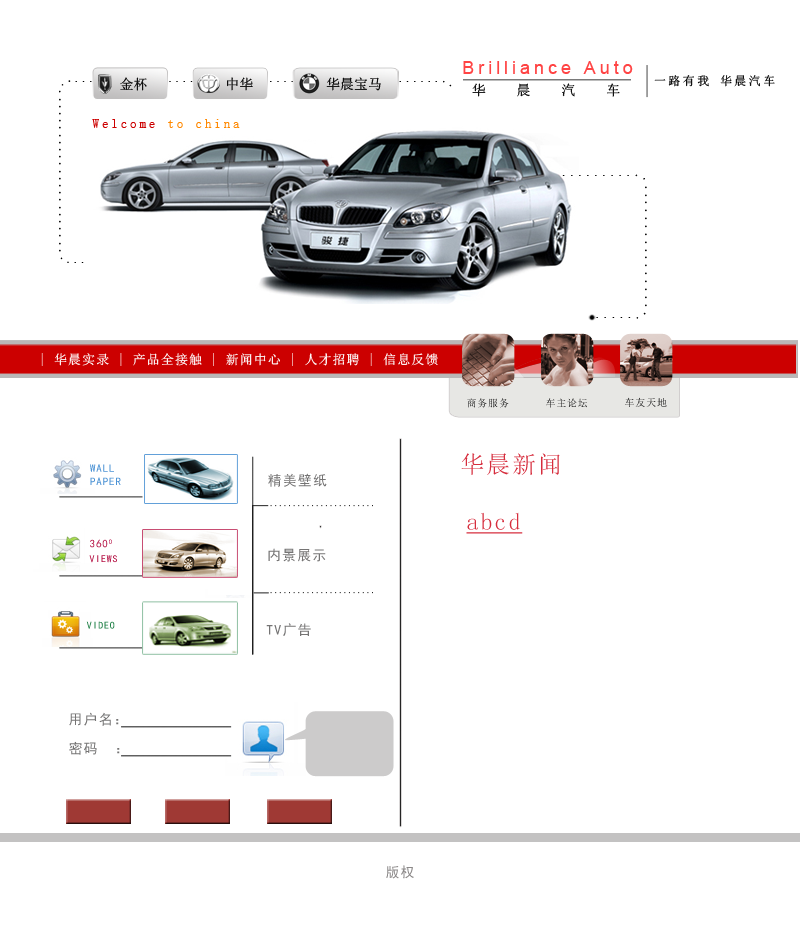
<style>
.page{position:relative;width:800px;height:933px;background:#ffffff}
.page>*{position:absolute;margin:0}
.t1{font:18px "ArialMT";letter-spacing:0.22em;color:#ff4444}
.t2{font:14px "SimSun";color:#000000}
.t3{font:14px "SimSun"}
.t4{font:12px "SimSun";letter-spacing:0.2em;color:#000000}
.t5{font:14px "SimSun";letter-spacing:2.2em;color:#000000}
.t6{font:13px "SimSun";letter-spacing:0.22em;color:#ff8800}
.t7{font:13px "SimSun";letter-spacing:0.22em;color:#cc0000}
.t8{font:10.9px "SimSun";letter-spacing:0.22em;color:#000000}
.t9{font:13px "SimSun";letter-spacing:0.08em;color:#ffffff}
.t10{font:10px "SimSun";letter-spacing:0.08em}
.t11{font:24px "SimSun";letter-spacing:0.08em;color:#d62d3d}
.t12{font:11px "SimHei";letter-spacing:0.08em;color:#4b92d4;text-transform:uppercase}
.t13{font:24px "SimHei";letter-spacing:0.08em;color:#757474;text-transform:uppercase}
.t14{font:24px "SimSun";letter-spacing:0.08em;color:#d62d3d;text-decoration:underline}
.t15{font:17px "SimHei";letter-spacing:0.08em;text-transform:uppercase}
.t16{font:11px "SimHei";letter-spacing:0.08em;text-transform:uppercase}
.t17{font:17px "SimHei";letter-spacing:0.08em;color:#1d7f44;text-transform:uppercase}
.t18{font:24px "SimHei";letter-spacing:0.08em;color:#8b8888;text-transform:uppercase}
</style>
<div class="page">
<p class="t1" style="left:463px;top:61px;width:170px;height:13px">Brilliance Auto</p>
<p class="t2" style="left:120px;top:77px;width:27px;height:14px">金杯</p>
<p class="t3" style="left:227px;top:77px;width:26px;height:14px">中华</p>
<p class="t3" style="left:326px;top:77px;width:55px;height:14px">华晨宝马</p>
<p class="t4" style="left:654px;top:75px;width:121px;height:12px">一路有我 华晨汽车</p>
<p class="t5" style="left:472px;top:83px;width:148px;height:14px">华晨汽车</p>
<p class="t6" style="left:92px;top:119px;width:148px;height:9px"><span class="t7">Welcome </span>to china</p>
<p class="t8" style="left:562px;top:174px;width:85px;height:145px">..................................</p>
<p class="t9" style="left:41px;top:353px;width:397px;height:13px">| 华晨实录 | 产品全接触 | 新闻中心 | 人才招聘 | 信息反馈</p>
<p class="t10" style="left:467px;top:398px;width:42px;height:10px">商务服务</p>
<p class="t10" style="left:546px;top:398px;width:41px;height:10px">车主论坛</p>
<p class="t10" style="left:625px;top:397px;width:42px;height:10px">车友天地</p>
<p class="t11" style="left:461px;top:453px;width:99px;height:22px">华晨新闻</p>
<p class="t12" style="left:90px;top:464px;width:31px;height:21px">Wall<br>Paper</p>
<p class="t13" style="left:268px;top:473px;width:59px;height:14px">精美壁纸</p>
<p class="t14" style="left:466px;top:512px;width:57px;height:22px">abcd</p>
<p class="t15" style="left:89px;top:539px;width:28px;height:24px"><span class="t16">360o<br></span>Views</p>
<p class="t13" style="left:268px;top:548px;width:58px;height:14px">内景展示</p>
<p class="t17" style="left:86px;top:621px;width:29px;height:8px">Video</p>
<p class="t13" style="left:266px;top:623px;width:45px;height:13px">TV广告</p>
<p class="t13" style="left:69px;top:712px;width:51px;height:43px">用户名：<br>密码  ：</p>
<p class="t18" style="left:386px;top:865px;width:28px;height:14px">版权</p>
</div>
